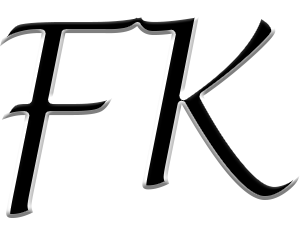
<style>
.page{position:relative;width:300px;height:230px;background:#ffffff}
.page>*{position:absolute;margin:0}
.t1{font:231.5px "LucidaHandwriting-Italic";color:#000000}
</style>
<div class="page">
<p class="t1" style="left:0px;top:11px;width:300px;height:207px">FK</p>
</div>
